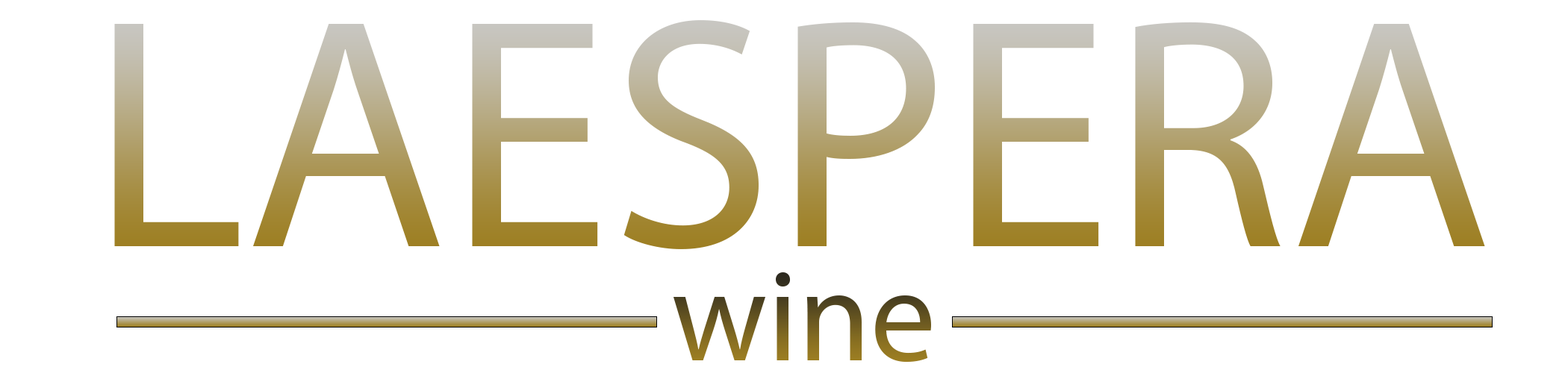
<style>
.page{position:relative;width:1568px;height:373px;background:#ffffff}
.page>*{position:absolute;margin:0}
.t1{font:330.2px "MyriadPro-Regular"}
.t2{font:130.6px "MyriadPro-Regular"}
</style>
<div class="page">
<p class="t1" style="left:114px;top:20px;width:1371px;height:229px">LAESPERA</p>
<p class="t2" style="left:673px;top:273px;width:258px;height:90px">wine</p>
</div>
